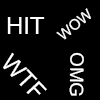
<style>
.page{position:relative;width:100px;height:100px;background:#000000}
.page>*{position:absolute;margin:0}
.t1{font:23.7px "ArialMT";color:#ffffff}
.t2{font:14.4px "ArialMT";color:#ffffff}
.t3{font:18.6px "ArialMT";color:#ffffff}
</style>
<div class="page">
<p class="t1" style="left:7px;top:17px;width:38px;height:17px">HIT</p>
<p class="t2" style="left:56px;top:8px;width:35px;height:32px;rotate:-39deg">WOW</p>
<p class="t1" style="left:3px;top:52px;width:44px;height:43px;rotate:47deg">WTF</p>
<p class="t3" style="left:69px;top:52px;width:15px;height:44px;rotate:91deg">OMG</p>
</div>
